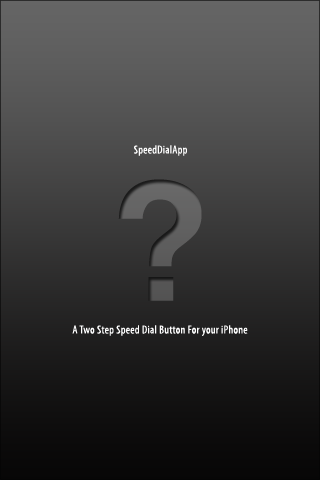
<style>
.page{position:relative;width:320px;height:480px}
.page>*{position:absolute;margin:0}
.t1{font:11.7px "MyriadPro-Cond";letter-spacing:0.025em;color:#ffffff}
.t2{font:166.7px "Helvetica-Bold";letter-spacing:0.025em;color:#605f5f}
</style>
<div class="page">
<p class="t1" style="left:134px;top:145px;width:53px;height:11px">SpeedDialApp</p>
<p class="t2" style="left:118px;top:179px;width:84px;height:122px">?</p>
<p class="t1" style="left:72px;top:325px;width:176px;height:11px">A Two Step Speed Dial Button For your iPhone</p>
</div>
